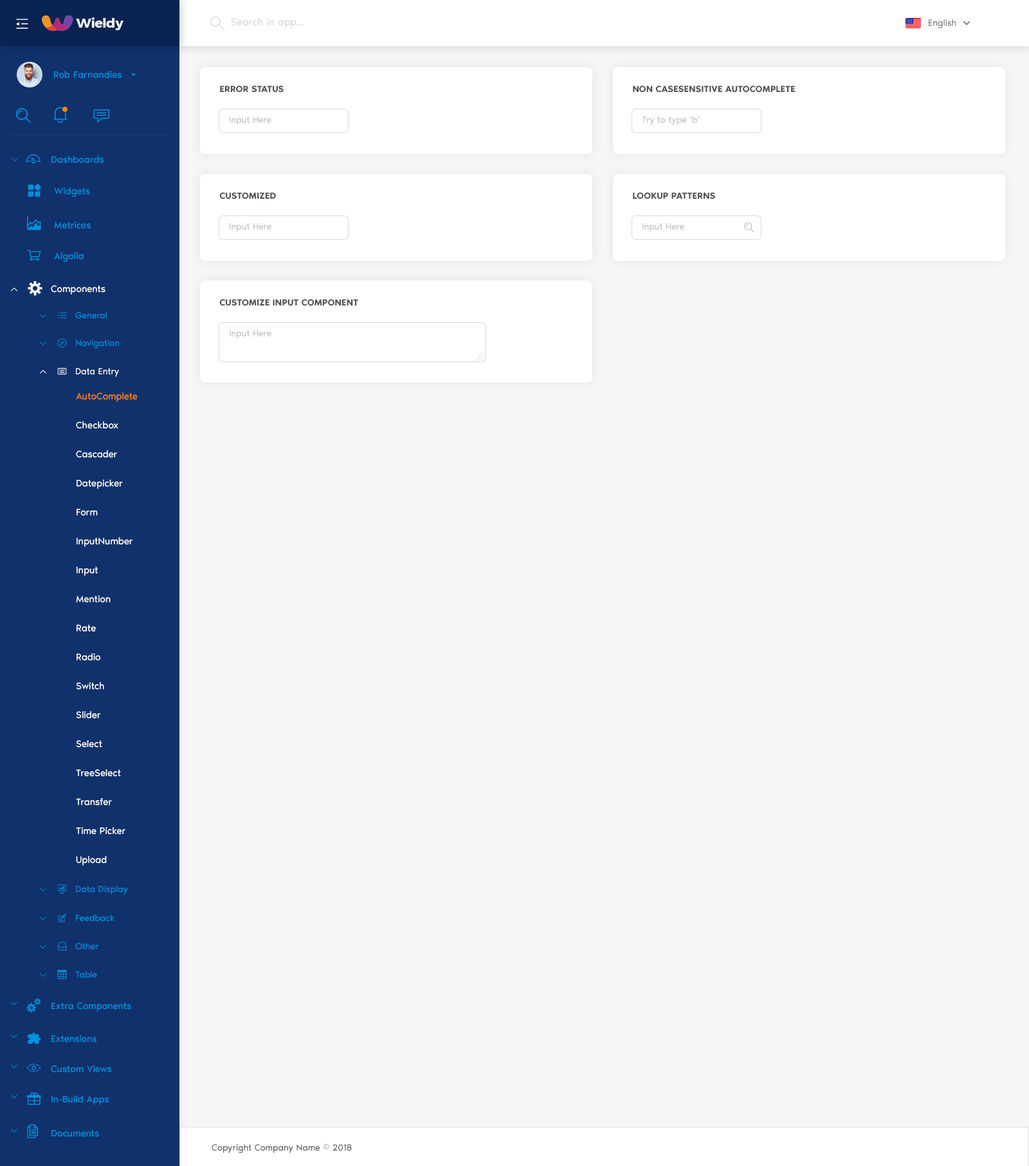
<style>
.page{position:relative;width:1029px;height:1166px;background:#f6f6f6}
.page>*{position:absolute;margin:0}
.t1{font:10.3px "NoirPro-Regular";color:#d9d9d9}
.t2{font:9px "NoirPro-Regular";color:#757575}
.t3{font:9.6px "NoirPro-Regular";color:#038fde}
.t4{font:9px "NoirPro-SemiBold";color:#535353;text-transform:uppercase}
.t5{font:9px "NoirPro-Regular";color:#bfbfbf}
.t6{font:7.7px "gaxonant"}
.t7{font:14.1px "gaxonant";color:#038fde}
.t8{font:14.1px "gaxonant";color:#ffffff}
.t9{font:9.6px "NoirPro-Regular";color:#ffffff}
.t10{font:7.7px "gaxonant";color:#038fde}
.t11{font:9px "gaxonant";color:#038fde}
.t12{font:9px "NoirPro-Regular";color:#038fde}
.t13{font:9px "gaxonant";color:#ffffff}
.t14{font:9px "NoirPro-Regular";color:#ffffff}
.t15{font:9.6px/25.7px "NoirPro-Regular";color:#ffffff}
.t16{font:9.6px/25.7px "NoirPro-Regular";color:#ff8400}
.t17{font:7.5px "gaxonant";color:#038fde}
.t18{font:9px "NoirPro-Regular";color:#595959}
</style>
<div class="page">
<p class="t1" style="left:231px;top:18px;width:73px;height:10px">Search in app...</p>
<p class="t2" style="left:928px;top:19px;width:28px;height:9px">English</p>
<p class="t3" style="left:54px;top:71px;width:68px;height:7px">Rob Farnandies</p>
<p class="t4" style="left:220px;top:86px;width:64px;height:7px">Error Status</p>
<p class="t4" style="left:633px;top:86px;width:162px;height:7px">Non CaseSensitive AutoComplete</p>
<p class="t5" style="left:230px;top:116px;width:41px;height:9px">Input Here</p>
<p class="t5" style="left:642px;top:116px;width:57px;height:9px">Try to type ‘b‘</p>
<p class="t6" style="left:12px;top:158px;width:6px;height:3px">2</p>
<p class="t7" style="left:26px;top:154px;width:14px;height:10px">-</p>
<p class="t3" style="left:51px;top:156px;width:53px;height:7px">Dashboards</p>
<p class="t3" style="left:54px;top:187px;width:36px;height:10px">Widgets</p>
<p class="t4" style="left:219px;top:192px;width:57px;height:7px">Customized</p>
<p class="t4" style="left:633px;top:192px;width:82px;height:7px">Lookup Patterns</p>
<p class="t7" style="left:27px;top:216px;width:14px;height:14px">m</p>
<p class="t3" style="left:54px;top:221px;width:37px;height:8px">Metrices</p>
<p class="t5" style="left:230px;top:223px;width:41px;height:9px">Input Here</p>
<p class="t5" style="left:642px;top:223px;width:42px;height:9px">Input Here</p>
<p class="t3" style="left:54px;top:252px;width:30px;height:10px">Algolia</p>
<p class="t8" style="left:28px;top:281px;width:14px;height:15px">%</p>
<p class="t6" style="left:11px;top:287px;width:6px;height:4px">5</p>
<p class="t9" style="left:51px;top:285px;width:54px;height:9px">Components</p>
<p class="t4" style="left:219px;top:299px;width:139px;height:7px">Customize Input Component</p>
<p class="t10" style="left:40px;top:314px;width:6px;height:4px">2</p>
<p class="t11" style="left:58px;top:312px;width:9px;height:6px">h</p>
<p class="t12" style="left:75px;top:312px;width:32px;height:7px">General</p>
<p class="t5" style="left:230px;top:330px;width:41px;height:9px">Input Here</p>
<p class="t10" style="left:40px;top:341px;width:6px;height:4px">2</p>
<p class="t12" style="left:76px;top:339px;width:43px;height:9px">Navigation</p>
<p class="t6" style="left:40px;top:370px;width:6px;height:4px">5</p>
<p class="t13" style="left:57px;top:368px;width:10px;height:7px">/</p>
<p class="t14" style="left:76px;top:368px;width:43px;height:9px">Data Entry</p>
<p class="t15" style="left:76px;top:392px;width:62px;height:473px"><span class="t16">AutoComplete<br></span>Checkbox<br>Cascader<br>Datepicker<br>Form<br>InputNumber<br>Input<br>Mention<br>Rate<br>Radio<br>Switch<br>Slider<br>Select<br>TreeSelect<br>Transfer<br>Time Picker<br>Upload</p>
<p class="t10" style="left:40px;top:887px;width:6px;height:4px">2</p>
<p class="t11" style="left:57px;top:884px;width:10px;height:10px">.</p>
<p class="t12" style="left:76px;top:885px;width:52px;height:9px">Data Display</p>
<p class="t10" style="left:40px;top:916px;width:6px;height:4px">2</p>
<p class="t12" style="left:76px;top:914px;width:38px;height:7px">Feedback</p>
<p class="t10" style="left:40px;top:944px;width:6px;height:4px">2</p>
<p class="t12" style="left:75px;top:942px;width:23px;height:8px">Other</p>
<p class="t10" style="left:40px;top:973px;width:6px;height:4px">2</p>
<p class="t12" style="left:75px;top:971px;width:22px;height:7px">Table</p>
<p class="t17" style="left:11px;top:1001px;width:6px;height:4px">2</p>
<p class="t3" style="left:51px;top:1002px;width:80px;height:9px">Extra Components</p>
<p class="t17" style="left:11px;top:1034px;width:6px;height:4px">2</p>
<p class="t3" style="left:51px;top:1034px;width:45px;height:8px">Extensions</p>
<p class="t17" style="left:11px;top:1064px;width:6px;height:4px">2</p>
<p class="t7" style="left:27px;top:1063px;width:13px;height:9px">,</p>
<p class="t3" style="left:51px;top:1065px;width:61px;height:7px">Custom Views</p>
<p class="t17" style="left:11px;top:1094px;width:6px;height:4px">2</p>
<p class="t3" style="left:51px;top:1095px;width:58px;height:9px">In-Build Apps</p>
<p class="t17" style="left:11px;top:1128px;width:6px;height:4px">2</p>
<p class="t7" style="left:27px;top:1124px;width:11px;height:14px">)</p>
<p class="t3" style="left:51px;top:1130px;width:48px;height:7px">Documents</p>
<p class="t18" style="left:212px;top:1143px;width:140px;height:10px">Copyright Company Name © 2018</p>
</div>
